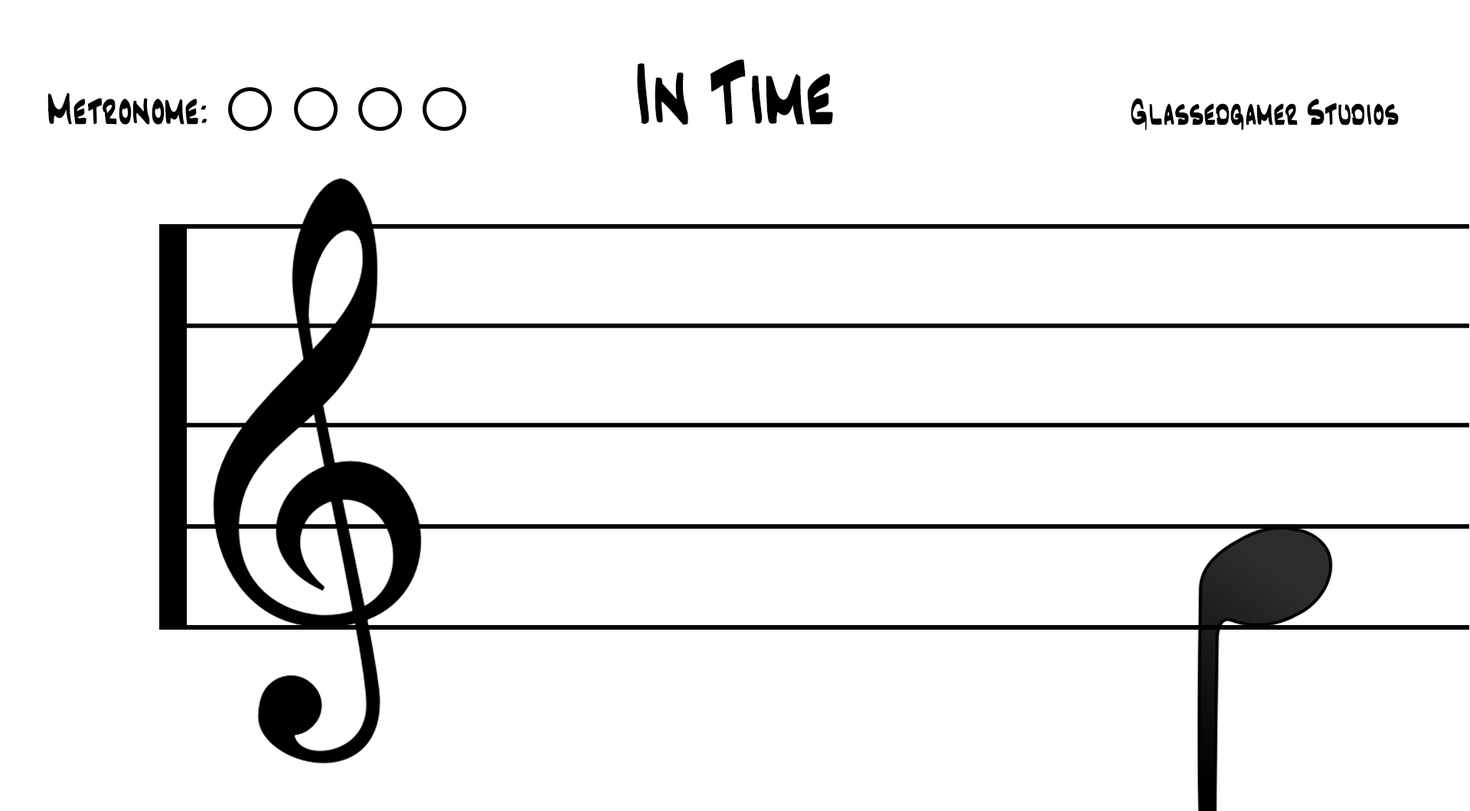
<style>
.page{position:relative;width:1470px;height:811px;background:#ffffff}
.page>*{position:absolute;margin:0}
.t1{font:76.5px "GjmRealbook";color:#000000}
.t2{font:38.3px "GjmRealbook";color:#000000}
.t3{font:31.9px "GjmRealbook";color:#000000}
</style>
<div class="page">
<p class="t1" style="left:637px;top:59px;width:196px;height:66px">In Time</p>
<p class="t2" style="left:47px;top:93px;width:160px;height:32px">Metronome:</p>
<p class="t3" style="left:1131px;top:98px;width:267px;height:33px">Glassedgamer Studios</p>
</div>
